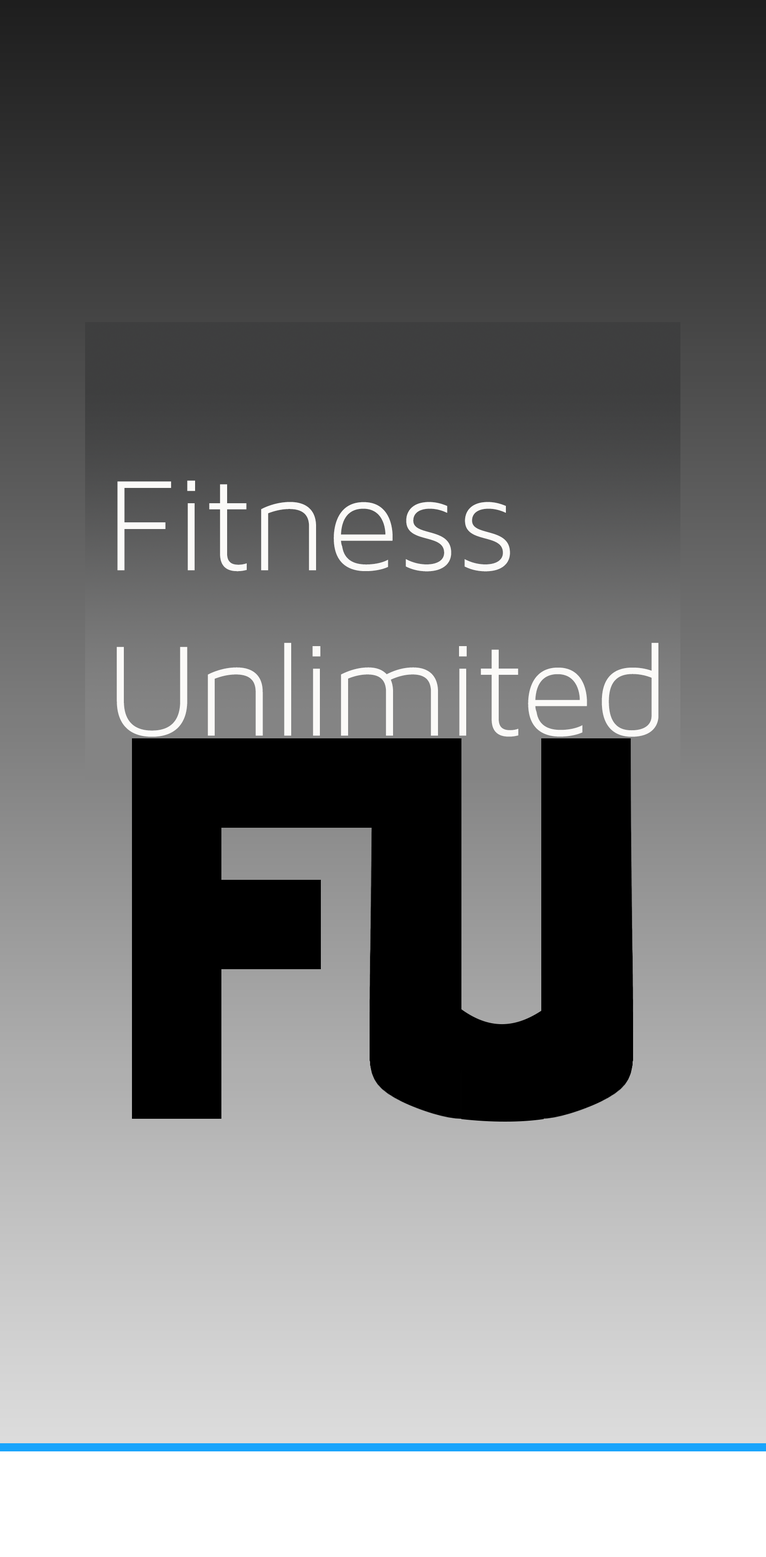
<style>
.page{position:relative;width:766px;height:1557px}
.page>*{position:absolute;margin:0}
.t1{font:137.9px "MavenProLight300-Regular";color:#fbfaf8}
</style>
<div class="page">
<p class="t1" style="left:117px;top:480px;width:541px;height:257px">Fitness<br>Unlimited</p>
</div>
